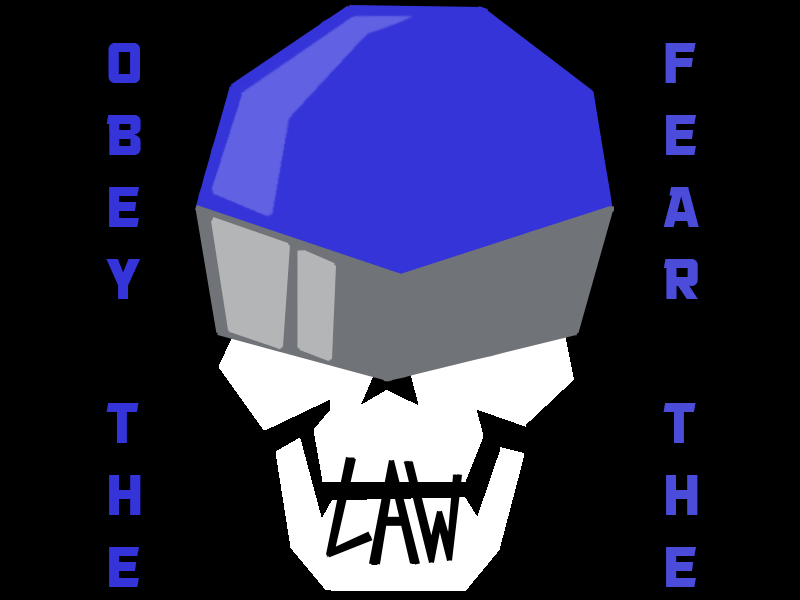
<style>
.page{position:relative;width:800px;height:600px;background:#000000}
.page>*{position:absolute;margin:0}
.t1{font:60px "GovernmentAgentBB";color:#3434d8}
.t2{font:60px "GovernmentAgentBB";color:#4c4cda}
</style>
<div class="page">
<p class="t1" style="left:106px;top:43px;width:35px;height:544px">O<br>B<br>E<br>Y <br><br>T<br>H<br>E</p>
<p class="t2" style="left:663px;top:43px;width:36px;height:544px">F<br>E<br>A<br>R <br><br>T<br>H<br>E</p>
</div>
